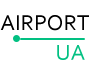
<style>
.page{position:relative;width:90px;height:75px;background:#ffffff}
.page>*{position:absolute;margin:0}
.t1{font:22.7px "Corbel";color:#000000}
.t2{font:22.7px "Corbel";color:#02c082}
</style>
<div class="page">
<p class="t1" style="left:0px;top:15px;width:89px;height:16px">AIRPORT</p>
<p class="t2" style="left:57px;top:45px;width:28px;height:15px">UA</p>
</div>
